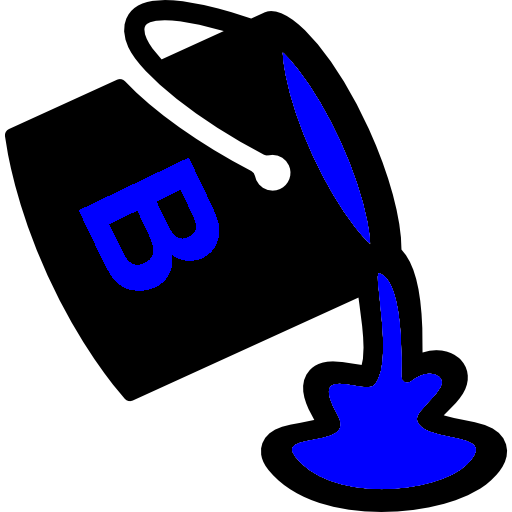
<style>
.page{position:relative;width:512px;height:512px;background:#ffffff}
.page>*{position:absolute;margin:0}
.t1{font:168.8px "Arial-BoldMT";color:#0000ff}
</style>
<div class="page">
<p class="t1" style="left:79px;top:158px;width:140px;height:133px;rotate:64deg">B</p>
</div>
